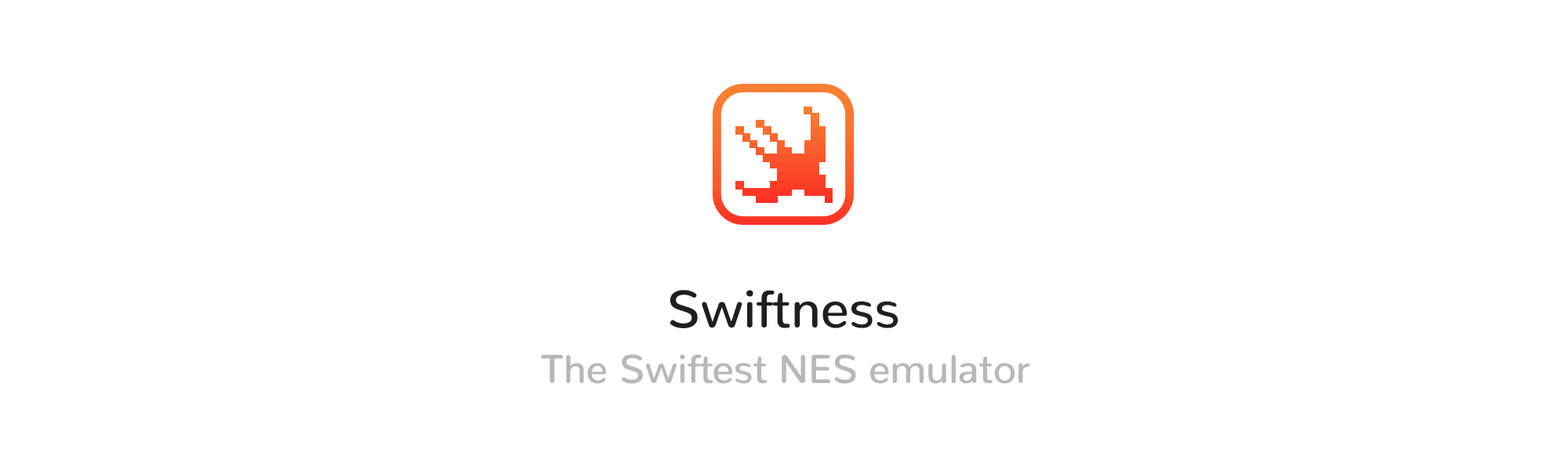
<style>
.page{position:relative;width:1568px;height:470px;background:#ffffff}
.page>*{position:absolute;margin:0}
.t1{font:52.5px "Nunito-Medium";letter-spacing:-0.005em;color:#1f1f1f}
.t2{font:40px "Nunito-Medium";letter-spacing:-0.005em;color:#b8b8b8}
</style>
<div class="page">
<p class="t1" style="left:670px;top:290px;width:228px;height:38px">Swiftness</p>
<p class="t2" style="left:541px;top:354px;width:489px;height:30px">The Swiftest NES emulator</p>
</div>
